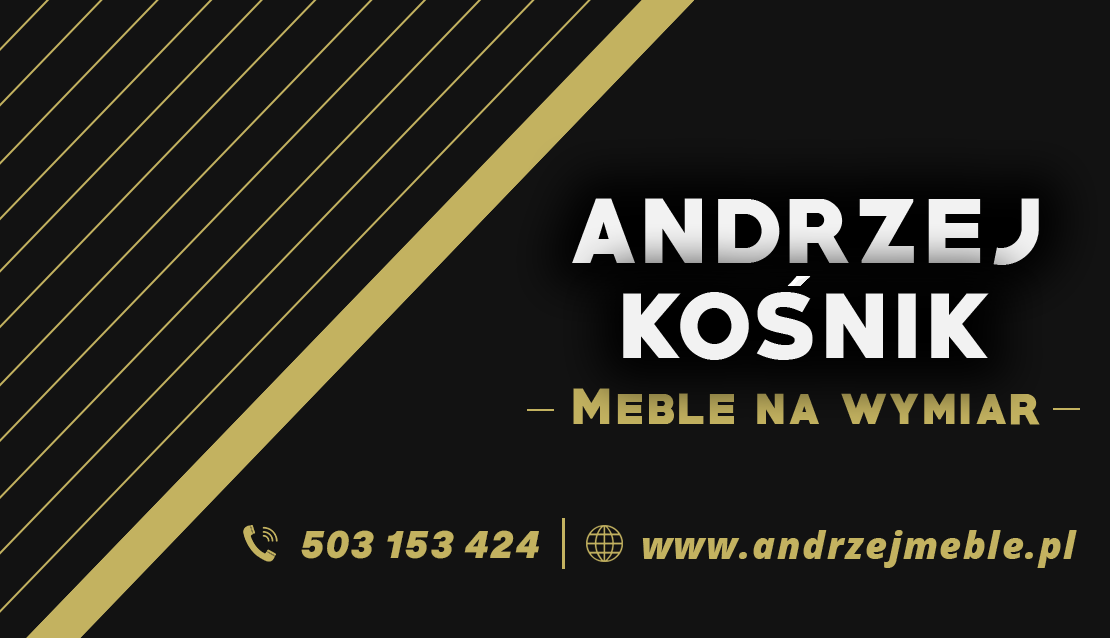
<style>
.page{position:relative;width:1110px;height:638px;background:#121212}
.page>*{position:absolute;margin:0}
.t1{font:83.3px "PRIMETIME-Regular";letter-spacing:0.05em;color:#f2f2f2}
.t2{font:45.8px "PRIMETIME-Regular";letter-spacing:0.05em;color:#c3b260}
.t3{font:37.5px "MonaSans-BlackItalic";letter-spacing:0.05em;color:#c3b260}
.t4{font:37.5px "OpenSans-ExtraBoldItalic";letter-spacing:0.05em;color:#c3b260}
</style>
<div class="page">
<p class="t1" style="left:572px;top:198px;width:467px;height:67px">ANDRZEJ</p>
<p class="t1" style="left:623px;top:292px;width:366px;height:68px">KOSNIK</p>
<p class="t2" style="left:573px;top:388px;width:467px;height:37px">Meble na wymiar</p>
<p class="t3" style="left:301px;top:530px;width:238px;height:29px">503 153 424</p>
<p class="t4" style="left:642px;top:530px;width:435px;height:38px">www.andrzejmeble.pl</p>
</div>
